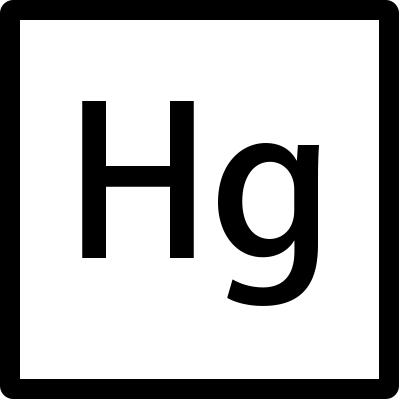
<style>
.page{position:relative;width:400px;height:400px;background:#ffffff}
.page>*{position:absolute;margin:0}
.t1{font:204.5px "AdobeFanHeitiStd-Bold";color:#000000}
</style>
<div class="page">
<p class="t1" style="left:82px;top:101px;width:238px;height:205px">Hg</p>
</div>
